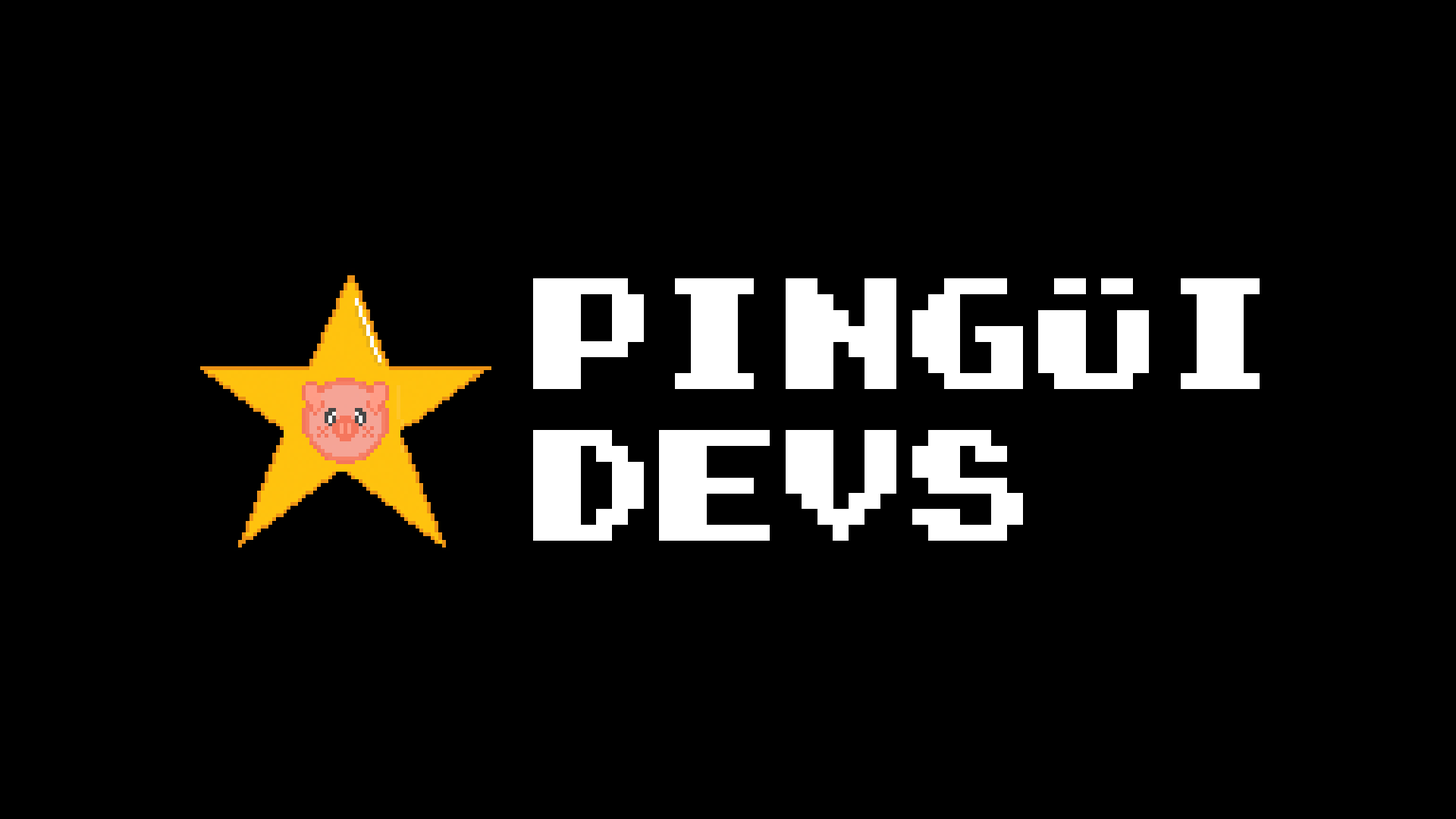
<style>
.page{position:relative;width:1456px;height:819px;background:#000000}
.page>*{position:absolute;margin:0}
.t1{font:126.4px "Super-Mario-Bros.-2";color:#ffffff}
</style>
<div class="page">
<p class="t1" style="left:533px;top:278px;width:727px;height:263px">Pingüi<br>devs</p>
</div>
